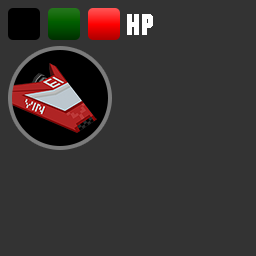
<style>
.page{position:relative;width:256px;height:256px;background:#333333}
.page>*{position:absolute;margin:0}
.t1{font:28.3px "MachineStd";letter-spacing:0.05em;color:#ffffff;font-weight:bold;scale:0.94 1}
</style>
<div class="page">
<p class="t1" style="left:127px;top:14px;width:26px;height:21px">HP</p>
</div>
